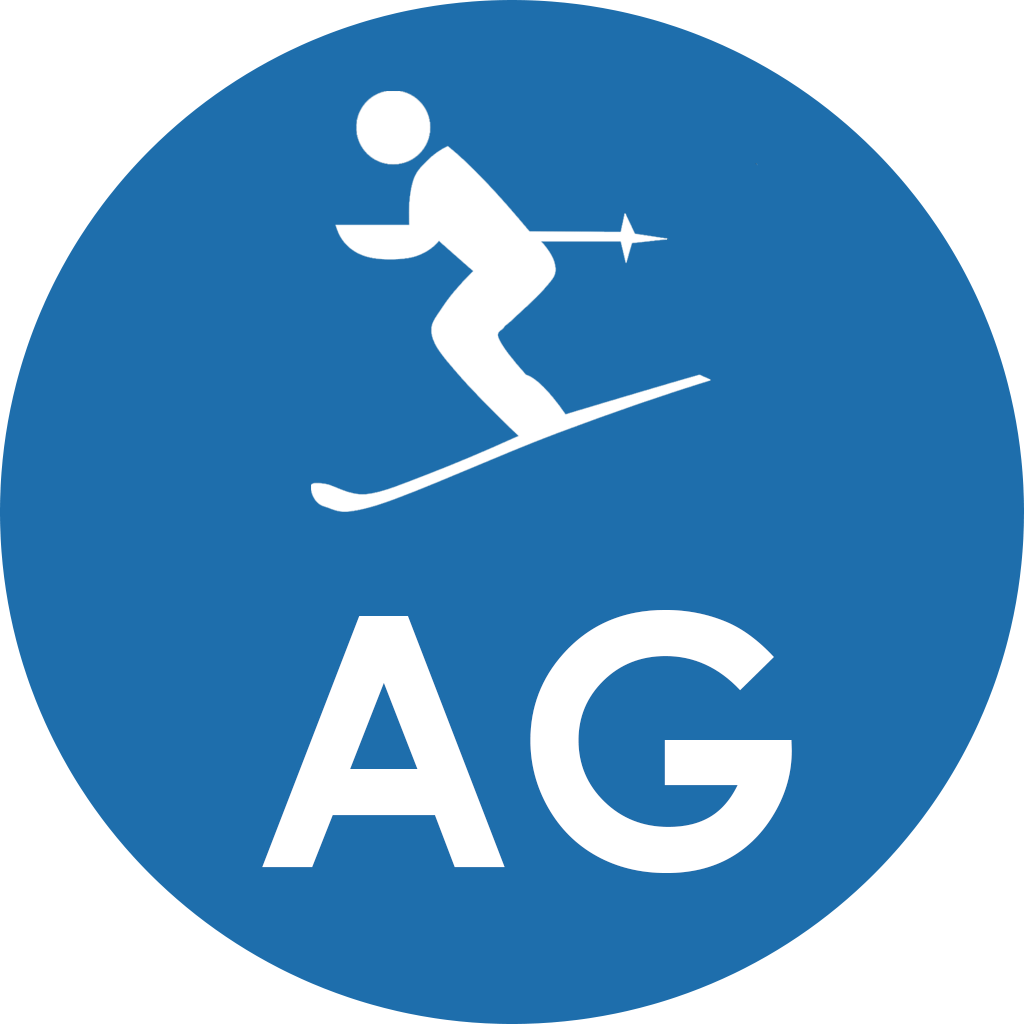
<style>
.page{position:relative;width:1024px;height:1024px;background:#1e6eac}
.page>*{position:absolute;margin:0}
.t1{font:350px "CenturyGothic-Bold";color:#ffffff}
</style>
<div class="page">
<p class="t1" style="left:262px;top:610px;width:530px;height:263px">AG</p>
</div>
